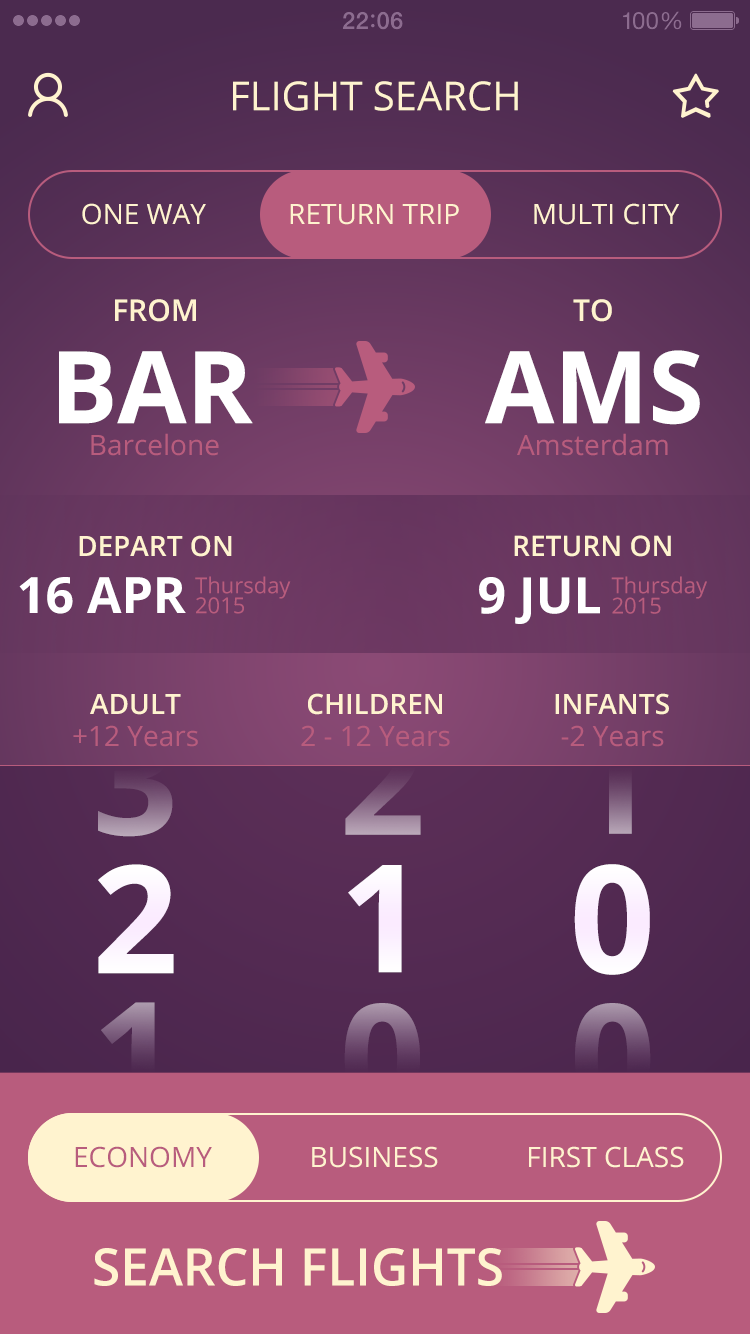
<style>
.page{position:relative;width:750px;height:1334px}
.page>*{position:absolute;margin:0}
.t1{font:40px "OpenSans";color:#fff3cf;text-transform:uppercase}
.t2{font:28px "OpenSans";color:#fff3cf;text-transform:uppercase}
.t3{font:30px "OpenSans-Semibold";color:#fff3cf;text-transform:uppercase}
.t4{font:100px "OpenSans-Bold";color:#ffffff;text-transform:uppercase}
.t5{font:28px "OpenSans";color:#b85c7d}
.t6{font:28px "OpenSans-Semibold";color:#fff3cf;text-transform:uppercase}
.t7{font:28.2px "OpenSans-Semibold";color:#fff3cf;text-transform:uppercase}
.t8{font:50px "OpenSans-Bold";color:#ffffff;text-transform:uppercase}
.t9{font:22px/20px "OpenSans";color:#b85c7d}
.t10{font:50.3px "OpenSans-Bold";color:#ffffff;text-transform:uppercase}
.t11{font:22.1px/20.1px "OpenSans";color:#b85c7d}
.t12{font:28.1px "OpenSans-Semibold";color:#fff3cf;text-transform:uppercase}
.t13{font:28.1px "OpenSans";color:#b85c7d}
.t14{font:149.8px "OpenSans-Bold";text-transform:uppercase}
.t15{font:150px "OpenSans-Bold";color:#ffffff;text-transform:uppercase}
.t16{font:28px "OpenSans";color:#b85c7d;text-transform:uppercase}
.t17{font:51.8px "OpenSans-Semibold";color:#fff3cf;text-transform:uppercase}
</style>
<div class="page">
<p class="t1" style="left:233px;top:81px;width:285px;height:30px">Flight Search</p>
<p class="t2" style="left:82px;top:203px;width:124px;height:22px">One Way</p>
<p class="t2" style="left:290px;top:204px;width:169px;height:21px">Return Trip</p>
<p class="t2" style="left:534px;top:203px;width:145px;height:22px">Multi city</p>
<p class="t3" style="left:115px;top:299px;width:81px;height:23px">From</p>
<p class="t3" style="left:573px;top:299px;width:39px;height:23px">TO</p>
<p class="t4" style="left:59px;top:351px;width:194px;height:73px">Bar</p>
<p class="t4" style="left:485px;top:350px;width:215px;height:75px">AMS</p>
<p class="t5" style="left:91px;top:433px;width:128px;height:23px">Barcelone</p>
<p class="t5" style="left:517px;top:433px;width:151px;height:23px">Amsterdam</p>
<p class="t6" style="left:79px;top:535px;width:153px;height:22px">Depart On</p>
<p class="t7" style="left:514px;top:535px;width:157px;height:22px">Return On</p>
<p class="t8" style="left:19px;top:577px;width:167px;height:37px">16 APR</p>
<p class="t9" style="left:195px;top:576px;width:96px;height:38px">Thursday<br>2015</p>
<p class="t10" style="left:479px;top:577px;width:121px;height:47px">9 Jul</p>
<p class="t11" style="left:611px;top:576px;width:96px;height:38px">Thursday<br>2015</p>
<p class="t12" style="left:90px;top:694px;width:91px;height:21px">Adult</p>
<p class="t12" style="left:308px;top:693px;width:134px;height:22px">Children</p>
<p class="t12" style="left:555px;top:693px;width:114px;height:22px">Infants</p>
<p class="t13" style="left:73px;top:725px;width:125px;height:22px">+12 Years</p>
<p class="t14" style="left:98px;top:726px;width:75px;height:111px">3</p>
<p class="t13" style="left:301px;top:725px;width:149px;height:22px">2 - 12 Years</p>
<p class="t14" style="left:345px;top:726px;width:76px;height:109px">2</p>
<p class="t13" style="left:561px;top:725px;width:103px;height:22px">-2 Years</p>
<p class="t14" style="left:578px;top:726px;width:54px;height:108px">1</p>
<p class="t15" style="left:98px;top:864px;width:76px;height:110px">2</p>
<p class="t15" style="left:348px;top:865px;width:54px;height:108px">1</p>
<p class="t15" style="left:574px;top:864px;width:76px;height:111px">0</p>
<p class="t14" style="left:101px;top:1002px;width:54px;height:108px">1</p>
<p class="t14" style="left:344px;top:1003px;width:76px;height:111px">0</p>
<p class="t14" style="left:575px;top:1003px;width:76px;height:111px">0</p>
<p class="t16" style="left:75px;top:1146px;width:137px;height:22px">Economy</p>
<p class="t2" style="left:312px;top:1146px;width:126px;height:22px">Business</p>
<p class="t2" style="left:529px;top:1146px;width:155px;height:22px">First Class</p>
<p class="t17" style="left:94px;top:1248px;width:408px;height:38px">Search Flights</p>
</div>
